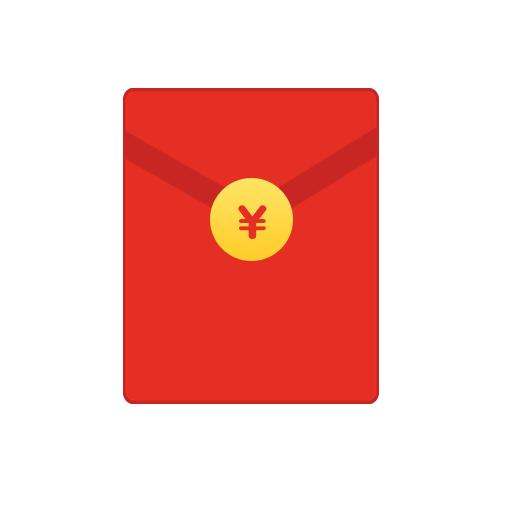
<style>
.page{position:relative;width:512px;height:512px;background:#ffffff}
.page>*{position:absolute;margin:0}
.t1{font:47px "FZY4JW--GB1-0";color:#e52f25;scale:1.08 1}
</style>
<div class="page">
<p class="t1" style="left:238px;top:205px;width:29px;height:34px">￥</p>
</div>
